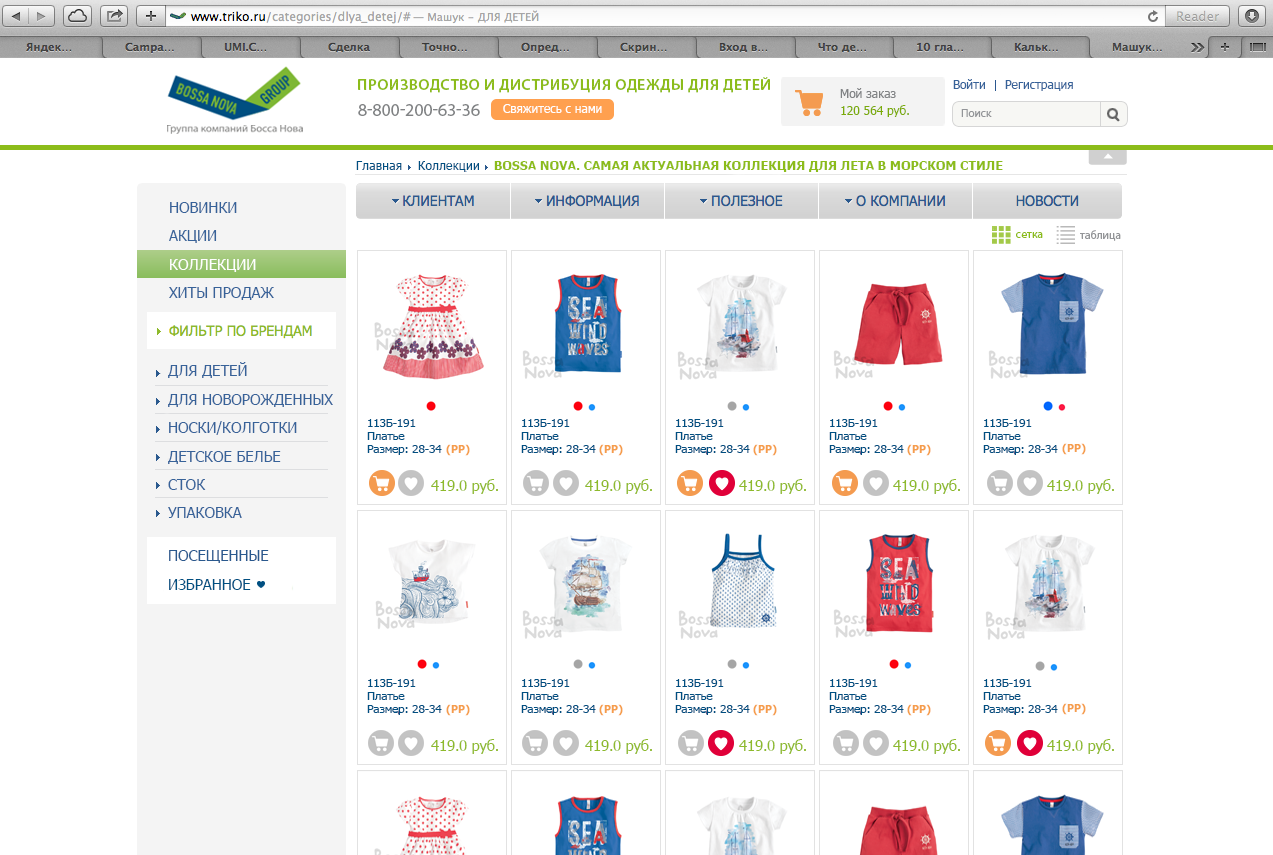
<style>
.page{position:relative;width:1273px;height:855px;background:#ffffff}
.page>*{position:absolute;margin:0}
.t1{font:15.4px "MyriadPro-Semibold";letter-spacing:0.03em;color:#8cbc1a;text-transform:uppercase}
.t2{font:12px "Tahoma";color:#808284}
.t3{font:12px "Tahoma";color:#376299}
.t4{font:17.5px "MyriadPro-Regular";color:#808284;text-transform:uppercase}
.t5{font:12px "Tahoma";color:#ffffff}
.t6{font:12px "Tahoma";color:#7bab08}
.t7{font:11px "Tahoma";letter-spacing:0.005em;color:#939598}
.t8{font:12px "Tahoma";color:#004f81;scale:1.04 1}
.t9{font:12px "Tahoma-Bold";color:#8cbc1a;scale:1.04 1}
.t10{font:15.2px/28.4px "Tahoma";letter-spacing:-0.01em;color:#376299;text-transform:uppercase}
.t11{font:11.5px "MyriadPro-Regular";color:#8cbc1a}
.t12{font:11.5px "MyriadPro-Regular";color:#939598}
.t13{font:15.2px "Tahoma";letter-spacing:-0.01em;color:#ffffff;text-transform:uppercase}
.t14{font:11px/13px "Tahoma";color:#004f81;scale:1.05 1}
.t15{font:11px/13px "Tahoma";color:#004f81;text-transform:uppercase;scale:1.05 1}
.t16{font:11px "Tahoma-Bold";letter-spacing:-0.005em;color:#f59d4b}
.t17{font:15px "Tahoma";letter-spacing:-0.025em;color:#8eba2b;text-transform:uppercase}
.t18{font:15px "Tahoma";letter-spacing:-0.025em;color:#8eba2b}
.t19{font:15.2px "Tahoma";letter-spacing:-0.01em;color:#2a598e;text-transform:uppercase}
.t20{font:15.2px "Tahoma";letter-spacing:-0.01em;color:#004f81;text-transform:uppercase}
</style>
<div class="page">
<p class="t1" style="left:358px;top:77px;width:412px;height:16px">Производство и дистрибуция одежды для детей</p>
<p class="t2" style="left:840px;top:88px;width:56px;height:10px">Мой заказ</p>
<p class="t3" style="left:953px;top:79px;width:32px;height:10px">Войти</p>
<p class="t3" style="left:1005px;top:80px;width:68px;height:11px">Регистрация</p>
<p class="t4" style="left:358px;top:104px;width:122px;height:12px">8-800-200-63-36</p>
<p class="t5" style="left:503px;top:104px;width:99px;height:9px">Свяжитесь с нами</p>
<p class="t6" style="left:841px;top:105px;width:68px;height:12px">120 564 руб.</p>
<p class="t7" style="left:961px;top:109px;width:31px;height:8px">Поиск</p>
<p class="t8" style="left:356px;top:161px;width:46px;height:9px">Главная</p>
<p class="t8" style="left:418px;top:161px;width:61px;height:11px">Коллекции</p>
<p class="t9" style="left:494px;top:161px;width:509px;height:11px">BOSSA NOVA. САМАЯ АКТУАЛЬНАЯ КОЛЛЕКЦИЯ ДЛЯ ЛЕТА В МОРСКОМ СТИЛЕ</p>
<p class="t10" style="left:169px;top:202px;width:105px;height:98px">НОВИНКИ<br>акции<br>коллекции<br>хиты продаж</p>
<p class="t11" style="left:1016px;top:232px;width:27px;height:6px">сетка</p>
<p class="t12" style="left:1080px;top:230px;width:41px;height:11px">таблица</p>
<p class="t13" style="left:170px;top:259px;width:86px;height:13px">коллекции</p>
<p class="t10" style="left:168px;top:362px;width:165px;height:156px">ДЛЯ ДЕТЕЙ<br>ДЛЯ НОВОРОЖДЕННЫХ<br>НОСКИ/КОЛГОТКИ<br>ДЕТСКОЕ БЕЛЬЕ<br>СТОК<br>УПАКОВКА</p>
<p class="t14" style="left:367px;top:419px;width:75px;height:36px"><span class="t15">113Б-191<br>П</span>латье<br>Размер: 28-34</p>
<p class="t14" style="left:521px;top:419px;width:75px;height:36px"><span class="t15">113Б-191<br>П</span>латье<br>Размер: 28-34</p>
<p class="t14" style="left:675px;top:419px;width:75px;height:36px"><span class="t15">113Б-191<br>П</span>латье<br>Размер: 28-34</p>
<p class="t14" style="left:829px;top:419px;width:75px;height:36px"><span class="t15">113Б-191<br>П</span>латье<br>Размер: 28-34</p>
<p class="t14" style="left:983px;top:419px;width:75px;height:36px"><span class="t15">113Б-191<br>П</span>латье<br>Размер: 28-34</p>
<p class="t16" style="left:446px;top:444px;width:24px;height:12px">(РР)</p>
<p class="t16" style="left:599px;top:444px;width:24px;height:12px">(РР)</p>
<p class="t16" style="left:753px;top:444px;width:24px;height:12px">(РР)</p>
<p class="t16" style="left:907px;top:444px;width:24px;height:12px">(РР)</p>
<p class="t16" style="left:1062px;top:443px;width:24px;height:12px">(РР)</p>
<p class="t17" style="left:431px;top:479px;width:67px;height:15px">419.0 <span class="t18">руб.</span></p>
<p class="t17" style="left:585px;top:479px;width:67px;height:15px">419.0 <span class="t18">руб.</span></p>
<p class="t17" style="left:739px;top:479px;width:67px;height:15px">419.0 <span class="t18">руб.</span></p>
<p class="t17" style="left:893px;top:479px;width:67px;height:15px">419.0 <span class="t18">руб.</span></p>
<p class="t17" style="left:1047px;top:479px;width:67px;height:15px">419.0 <span class="t18">руб.</span></p>
<p class="t19" style="left:169px;top:550px;width:100px;height:13px">ПОСЕЩЕННЫЕ</p>
<p class="t20" style="left:169px;top:579px;width:82px;height:11px">Избранное</p>
<p class="t14" style="left:367px;top:679px;width:75px;height:36px"><span class="t15">113Б-191<br>П</span>латье<br>Размер: 28-34</p>
<p class="t14" style="left:521px;top:679px;width:75px;height:36px"><span class="t15">113Б-191<br>П</span>латье<br>Размер: 28-34</p>
<p class="t14" style="left:675px;top:679px;width:75px;height:36px"><span class="t15">113Б-191<br>П</span>латье<br>Размер: 28-34</p>
<p class="t14" style="left:829px;top:679px;width:75px;height:36px"><span class="t15">113Б-191<br>П</span>латье<br>Размер: 28-34</p>
<p class="t14" style="left:983px;top:679px;width:75px;height:36px"><span class="t15">113Б-191<br>П</span>латье<br>Размер: 28-34</p>
<p class="t16" style="left:446px;top:704px;width:24px;height:12px">(РР)</p>
<p class="t16" style="left:599px;top:704px;width:24px;height:12px">(РР)</p>
<p class="t16" style="left:753px;top:704px;width:24px;height:12px">(РР)</p>
<p class="t16" style="left:907px;top:704px;width:24px;height:12px">(РР)</p>
<p class="t16" style="left:1062px;top:703px;width:24px;height:12px">(РР)</p>
<p class="t17" style="left:431px;top:739px;width:67px;height:15px">419.0 <span class="t18">руб.</span></p>
<p class="t17" style="left:585px;top:739px;width:67px;height:15px">419.0 <span class="t18">руб.</span></p>
<p class="t17" style="left:739px;top:739px;width:67px;height:15px">419.0 <span class="t18">руб.</span></p>
<p class="t17" style="left:893px;top:739px;width:67px;height:15px">419.0 <span class="t18">руб.</span></p>
<p class="t17" style="left:1047px;top:739px;width:67px;height:15px">419.0 <span class="t18">руб.</span></p>
</div>
